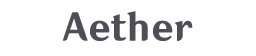
<style>
.page{position:relative;width:256px;height:56px;background:#ffffff}
.page>*{position:absolute;margin:0}
.t1{font:36px "HYWenHei-HEW";color:#4f4e57}
</style>
<div class="page">
<p class="t1" style="left:62px;top:11px;width:131px;height:30px">Aether</p>
</div>
